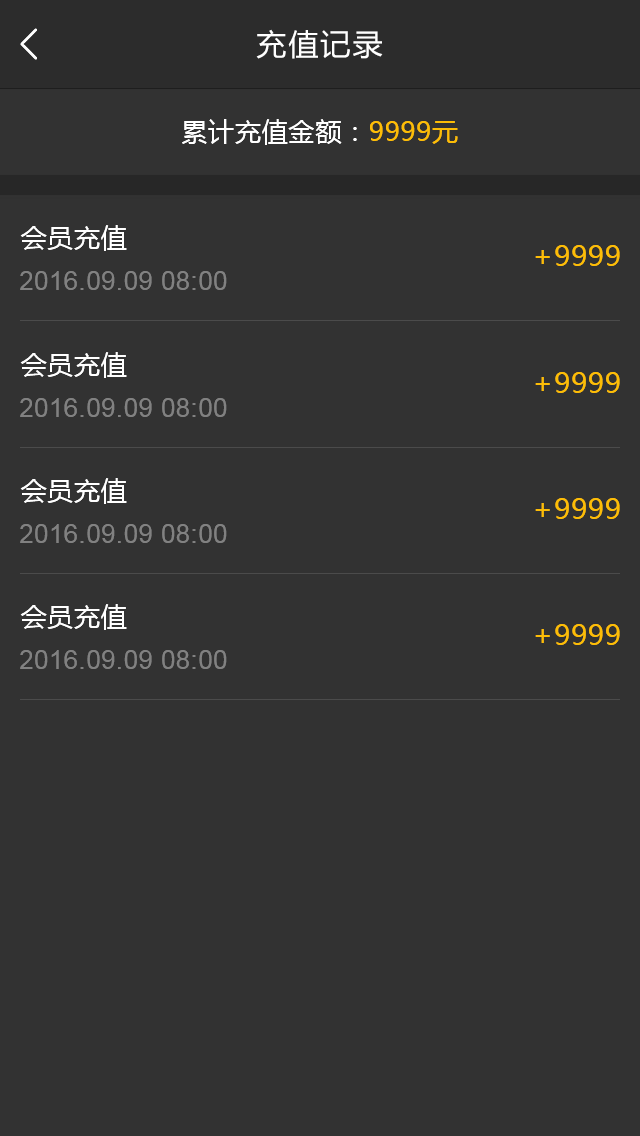
<style>
.page{position:relative;width:640px;height:1136px;background:#323232}
.page>*{position:absolute;margin:0}
.t1{font:30px "MicrosoftYaHei";letter-spacing:0.07em;color:#ffffff}
.t2{font:26px "MicrosoftYaHei";letter-spacing:0.03em;color:#ffffff}
.t3{font:26px "MicrosoftYaHei";letter-spacing:0.03em;color:#fdbd06}
.t4{font:28px "MicrosoftYaHei";letter-spacing:0.03em;color:#fdbd06}
.t5{font:26px "ArialMT";letter-spacing:0.03em;color:#818181}
</style>
<div class="page">
<p class="t1" style="left:256px;top:29px;width:127px;height:30px">充值记录</p>
<p class="t2" style="left:182px;top:119px;width:276px;height:26px">累计充值金额：<span class="t3">9999元</span></p>
<p class="t2" style="left:20px;top:225px;width:107px;height:26px">会员充值</p>
<p class="t4" style="left:535px;top:245px;width:85px;height:21px">+9999</p>
<p class="t5" style="left:20px;top:271px;width:207px;height:19px">2016.09.09 08:00</p>
<p class="t2" style="left:20px;top:352px;width:107px;height:26px">会员充值</p>
<p class="t4" style="left:535px;top:372px;width:85px;height:21px">+9999</p>
<p class="t5" style="left:20px;top:398px;width:207px;height:19px">2016.09.09 08:00</p>
<p class="t2" style="left:20px;top:478px;width:107px;height:26px">会员充值</p>
<p class="t4" style="left:535px;top:498px;width:85px;height:21px">+9999</p>
<p class="t5" style="left:20px;top:524px;width:207px;height:19px">2016.09.09 08:00</p>
<p class="t2" style="left:20px;top:604px;width:107px;height:26px">会员充值</p>
<p class="t4" style="left:535px;top:624px;width:85px;height:21px">+9999</p>
<p class="t5" style="left:20px;top:650px;width:207px;height:19px">2016.09.09 08:00</p>
</div>
